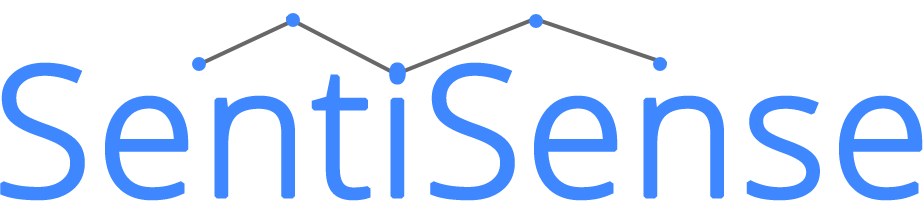
<style>
.page{position:relative;width:924px;height:211px;background:#ffffff}
.page>*{position:absolute;margin:0}
.t1{font:180.6px "OpenSans-Light";color:#3f87ff;font-weight:bold}
</style>
<div class="page">
<p class="t1" style="left:0px;top:62px;width:923px;height:139px">SentiSense</p>
</div>
